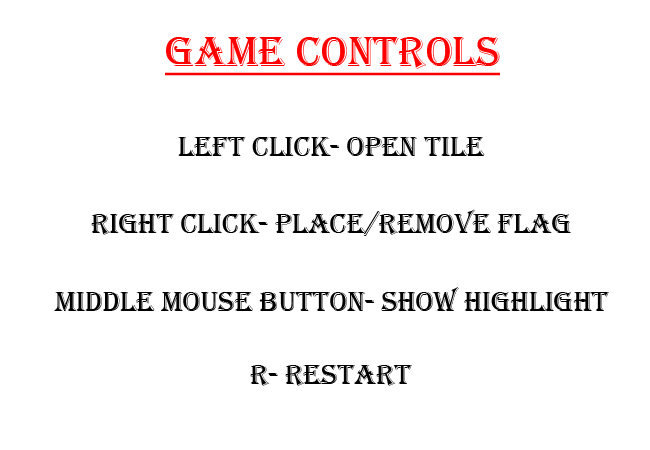
<style>
.page{position:relative;width:650px;height:450px;background:#ffffff}
.page>*{position:absolute;margin:0}
.t1{font:43px "Algerian";color:#ff0000;text-decoration:underline}
.t2{font:29px "Algerian";color:#000000}
</style>
<div class="page">
<p class="t1" style="left:165px;top:37px;width:335px;height:39px">Game Controls</p>
<p class="t2" style="left:178px;top:137px;width:307px;height:19px">left click- open tile</p>
<p class="t2" style="left:91px;top:209px;width:480px;height:27px">right click- place/remove flag</p>
<p class="t2" style="left:54px;top:287px;width:555px;height:24px">middle mouse button- show highlight</p>
<p class="t2" style="left:250px;top:365px;width:162px;height:21px">r- restart</p>
</div>
